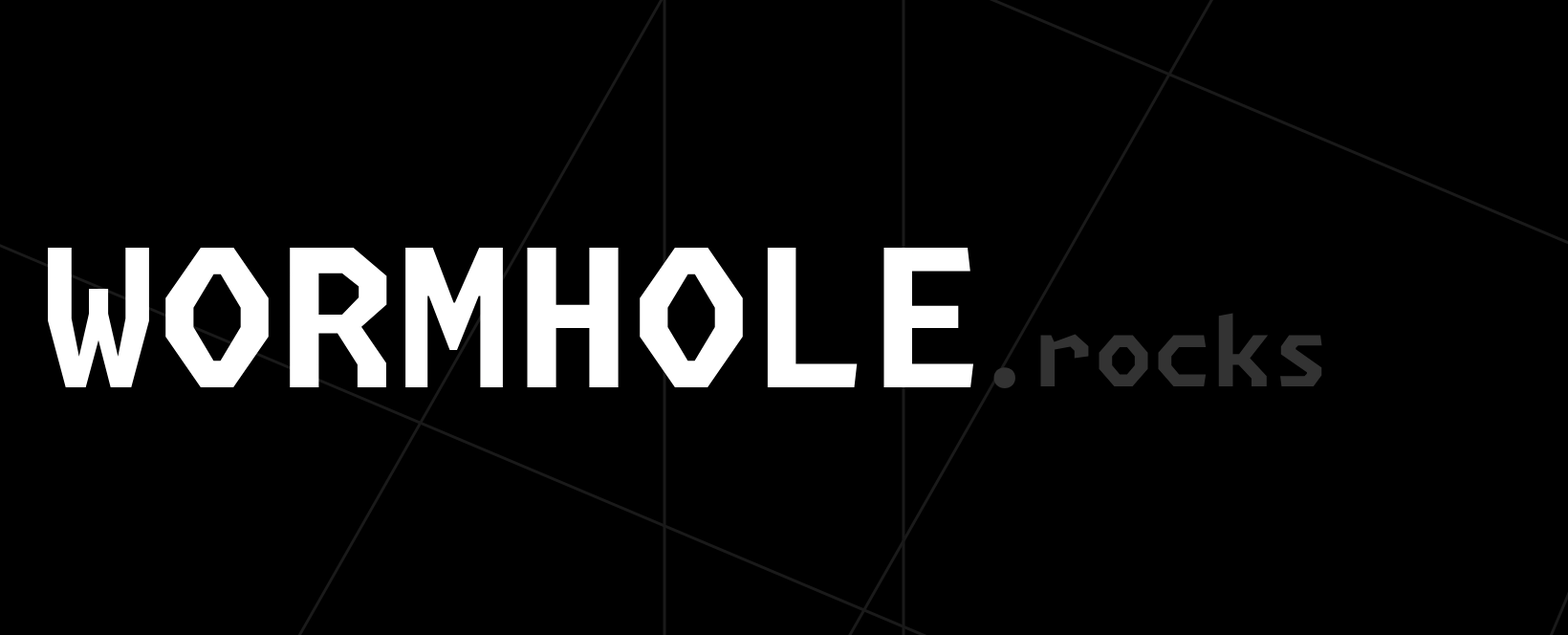
<style>
.page{position:relative;width:1568px;height:635px;background:#000000}
.page>*{position:absolute;margin:0}
.t1{font:191.2px "MonaspaceKrypton-Bold";color:#ffffff}
.t2{font:95.6px "MonaspaceKrypton-Bold";color:#333333}
</style>
<div class="page">
<p class="t1" style="left:48px;top:248px;width:925px;height:139px">WORMHOLE</p>
<p class="t2" style="left:993px;top:313px;width:329px;height:75px">.rocks</p>
</div>
